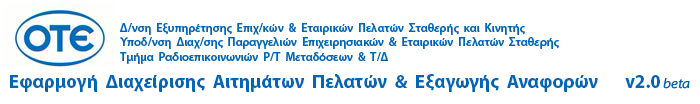
<style>
.page{position:relative;width:700px;height:104px;background:#ffffff}
.page>*{position:absolute;margin:0}
.t1{font:12px "MyriadPro-Semibold";color:#0066b6}
.t2{font:19px "MyriadPro-Bold";color:#0066b6}
.t3{font:14px "MyriadConceptItalic-SemiExtendedItalic";color:#0066b6}
</style>
<div class="page">
<p class="t1" style="left:120px;top:23px;width:439px;height:41px">Δ/νση  Εξυπηρέτησης  Επιχ/κών  &amp;  Εταιρικών  Πελατών  Σταθερής  και  Κινητής<br>Υποδ/νση  Διαχ/σης  Παραγγελιών  Επιχειρησιακών  &amp;  Εταιρικών  Πελατών  Σταθερής<br>Τμήμα  Ραδιοεπικοινωνιών  Ρ/Τ  Μεταδόσεων  &amp;  Τ/Δ</p>
<p class="t2" style="left:10px;top:74px;width:588px;height:18px">Εφαρμογή  Διαχείρισης  Αιτημάτων  Πελατών  &amp;  Εξαγωγής  Αναφορών</p>
<p class="t2" style="left:625px;top:75px;width:35px;height:13px">v2.0</p>
<p class="t3" style="left:663px;top:77px;width:27px;height:12px">beta</p>
</div>
